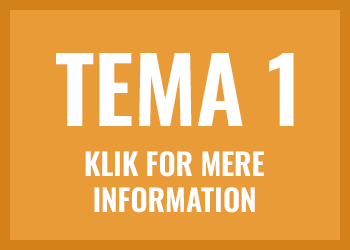
<style>
.page{position:relative;width:350px;height:250px;background:#e89b37}
.page>*{position:absolute;margin:0}
.t1{font:90px "Oswald-SemiBold";color:#ffffff}
.t2{font:30px "Oswald-SemiBold";color:#ffffff}
</style>
<div class="page">
<p class="t1" style="left:56px;top:53px;width:238px;height:73px">TEMA 1</p>
<p class="t2" style="left:85px;top:151px;width:179px;height:26px">KLIK FOR MERE</p>
<p class="t2" style="left:94px;top:187px;width:161px;height:26px">INFORMATION</p>
</div>
